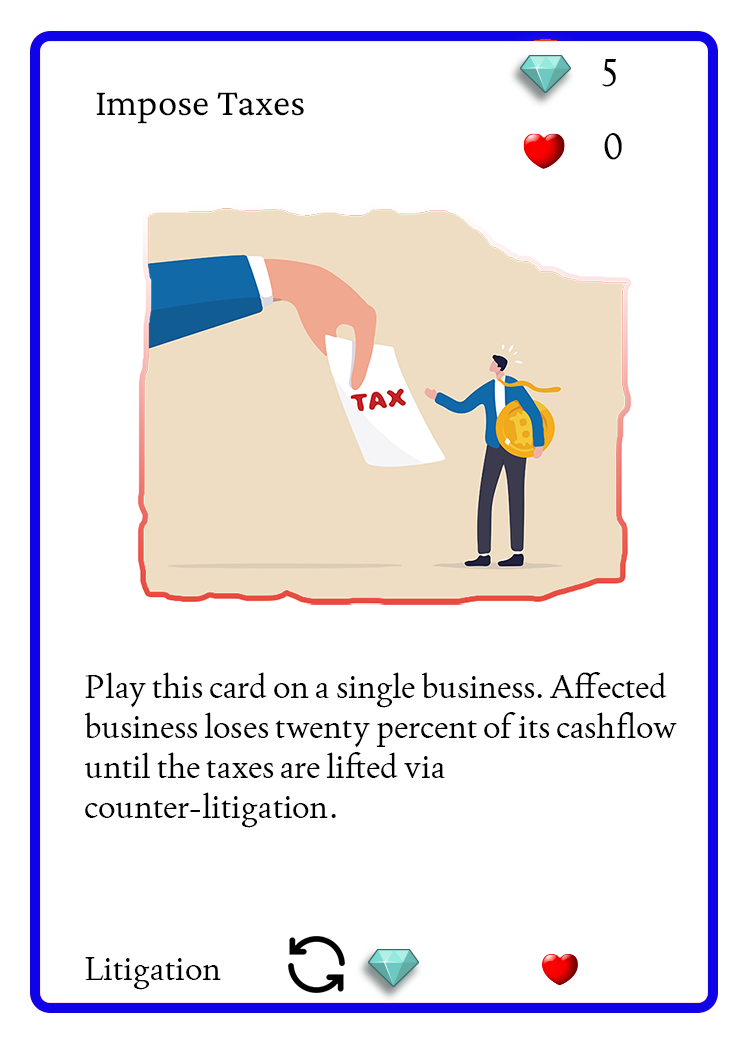
<style>
.page{position:relative;width:750px;height:1050px;background:#ffffff}
.page>*{position:absolute;margin:0}
.t1{font:37.5px "Joan-Regular";color:#000000;text-transform:uppercase}
.t2{font:38.9px "CrimsonPro-Regular";color:#000000}
.t3{font:33.3px "Joan-Regular";color:#000000}
</style>
<div class="page">
<p class="t1" style="left:602px;top:59px;width:14px;height:28px">5</p>
<p class="t2" style="left:96px;top:92px;width:208px;height:32px">Impose Taxes</p>
<p class="t1" style="left:604px;top:133px;width:18px;height:27px">0</p>
<p class="t3" style="left:84px;top:672px;width:593px;height:156px">Play this card on a single business. Affected business loses twenty percent of its cashflow until the taxes are lifted via counter-litigation.</p>
<p class="t3" style="left:85px;top:957px;width:136px;height:33px">Litigation</p>
</div>
